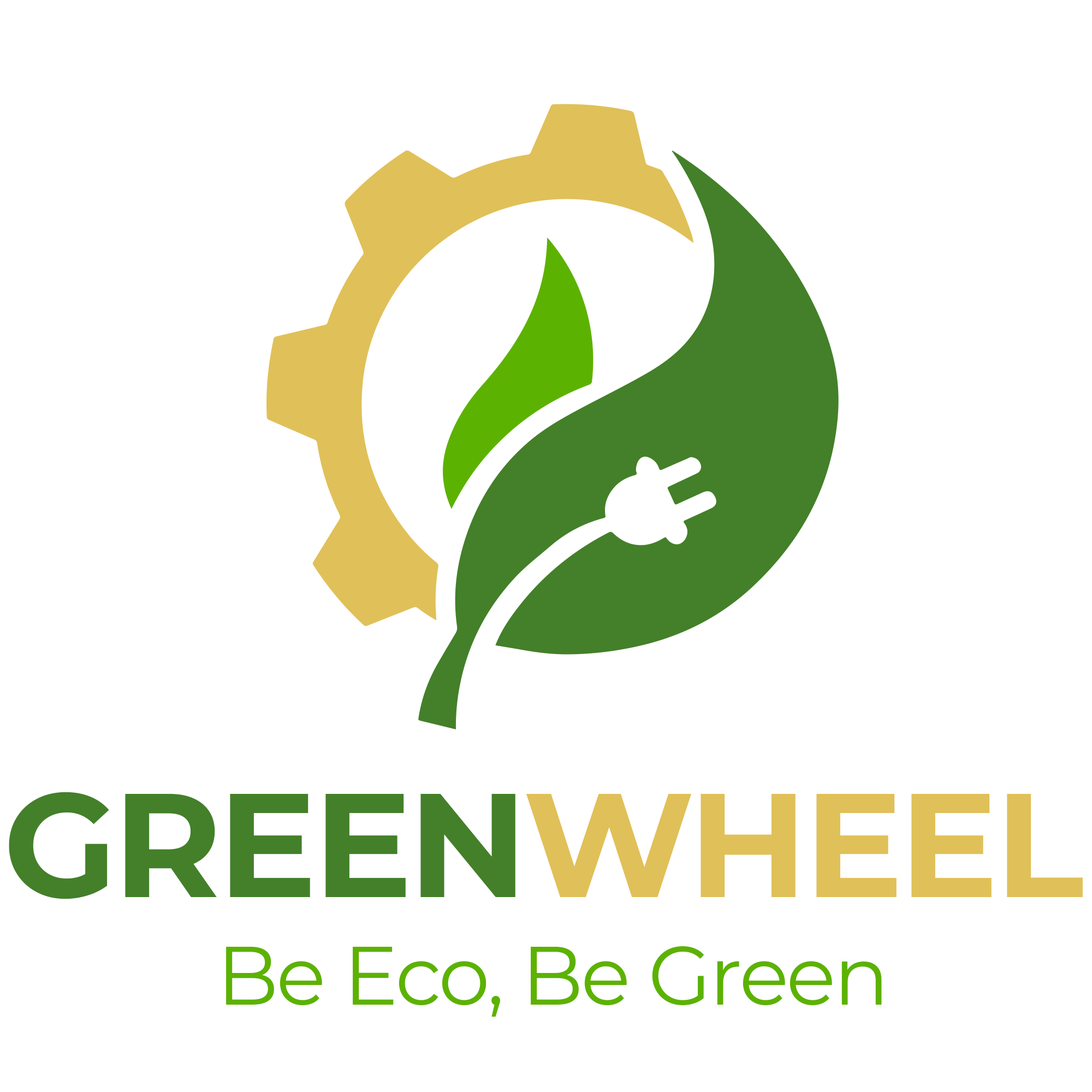
<style>
.page{position:relative;width:1092px;height:1092px;background:#ffffff}
.page>*{position:absolute;margin:0}
.t1{font:147.4px "Montserrat-Bold";letter-spacing:-0.025em;color:#438029}
.t2{font:147.4px "Montserrat-Bold";letter-spacing:-0.025em;color:#e0c058}
.t3{font:81.9px "Montserrat-Regular";letter-spacing:-0.025em;color:#5cb200}
</style>
<div class="page">
<p class="t1" style="left:9px;top:792px;width:1074px;height:107px">GREEN<span class="t2">WHEEL</span></p>
<p class="t3" style="left:226px;top:946px;width:656px;height:71px">Be Eco, Be Green</p>
</div>
